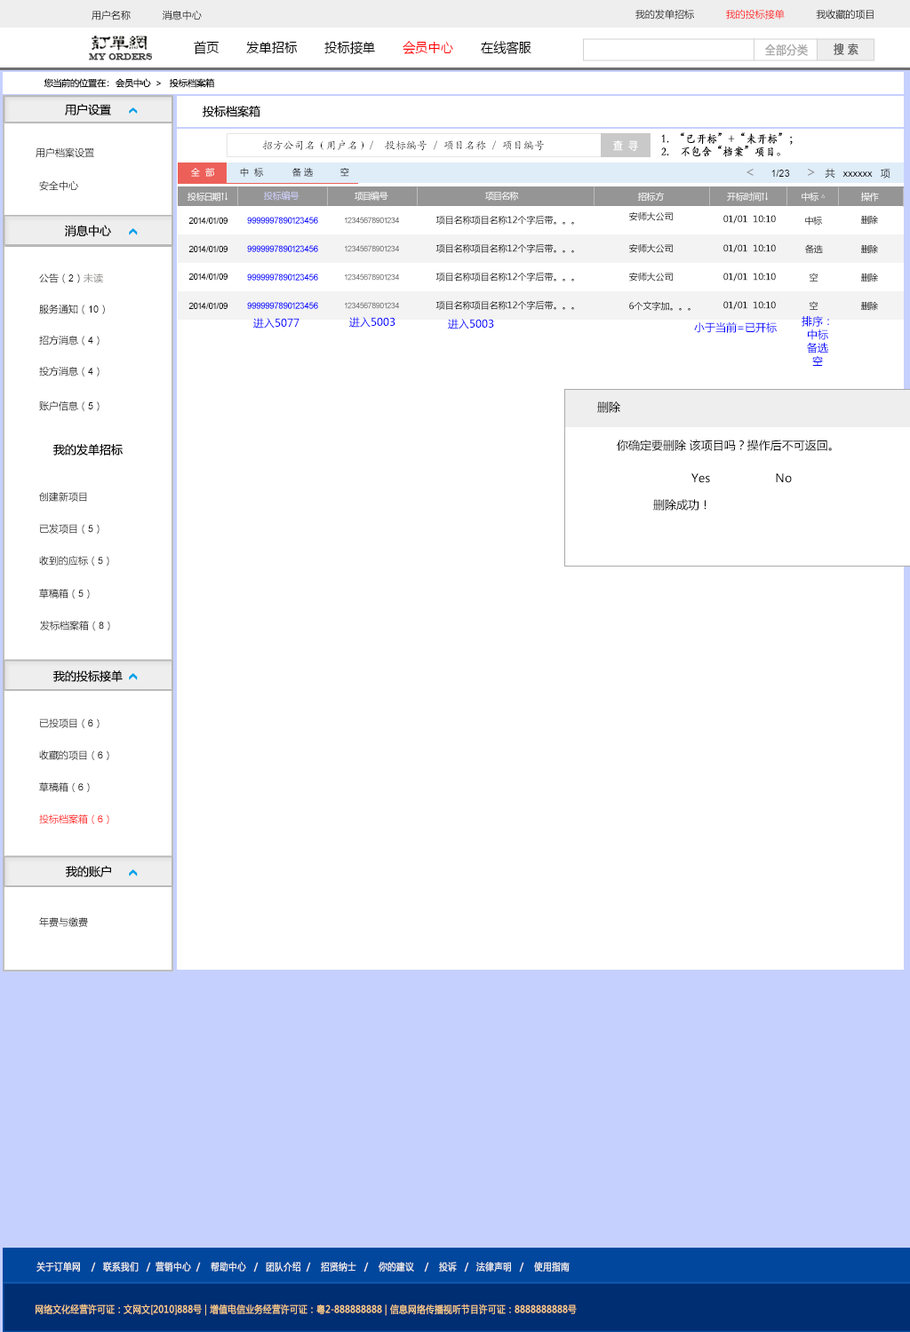
<style>
.page{position:relative;width:910px;height:1332px;background:#ffffff}
.page>*{position:absolute;margin:0}
.t1{font:9.8px "MicrosoftYaHei";color:#000000}
.t2{font:9.8px "MicrosoftYaHei"}
.t3{font:13.7px "MicrosoftYaHei";color:#000000;font-variant:small-caps;scale:0.94 1}
.t4{font:13.7px "MicrosoftYaHei";color:#ff0000;font-variant:small-caps;scale:0.94 1}
.t5{font:8.8px "EngraversMT";color:#434343;font-variant:small-caps;font-weight:bold;scale:0.86 1}
.t6{font:11.7px "MicrosoftYaHei";color:#aaaaaa;font-variant:small-caps;font-weight:bold;scale:0.86 1}
.t7{font:11.7px "MicrosoftYaHei";color:#626262;font-variant:small-caps;font-weight:bold;scale:0.86 1}
.t8{font:8.9px "MicrosoftYaHei";color:#060606}
.t9{font:11.5px "MicrosoftYaHei";color:#060606}
.t10{font:11.7px "STKaiti";color:#000000;font-variant:small-caps;font-weight:bold;scale:0.86 1}
.t11{font:9.8px "MicrosoftYaHei";color:#060606}
.t12{font:10.7px "KaiTi_GB2312";color:#000000}
.t13{font:10.7px "MicrosoftYaHei";color:#ffffff;font-variant:small-caps;font-weight:bold;scale:0.86 1}
.t14{font:9px "MicrosoftYaHei"}
.t15{font:9.8px "ArialMT";color:#060606}
.t16{font:14.2px "MicrosoftYaHei";color:#959595}
.t17{font:8.9px "MicrosoftYaHei";color:#ffffff}
.t18{font:8.9px "MicrosoftYaHei";color:#d1d2ff}
.t19{font:8.9px "ArialMT";color:#020202}
.t20{font:8.9px "ArialMT";color:#0000ff}
.t21{font:8px "ArialMT";color:#535353}
.t22{font:8.9px "MicrosoftYaHei";color:#000000}
.t23{font:8.9px "MicrosoftYaHei"}
.t24{font:8px "ArialMT";color:#626262}
.t25{font:9.8px "MicrosoftYaHei";color:#888584}
.t26{font:10.7px "MicrosoftYaHei";color:#0000ff}
.t27{font:10.7px/13.3px "MicrosoftYaHei";color:#0000ff}
.t28{font:11.5px "MicrosoftYaHei";color:#000000}
.t29{font:9.8px "ArialMT";color:#000000}
.t30{font:9.8px "ArialMT"}
.t31{font:9.8px "MicrosoftYaHei";color:#ff0000}
.t32{font:9.8px "ArialMT";color:#ff0000}
.t33{font:9.8px "MicrosoftYaHei";color:#eeeeee;font-variant:small-caps;font-weight:bold;scale:0.86 1}
.t34{font:13.7px "STXihei";color:#eeeeee;font-variant:small-caps;font-weight:bold;scale:0.86 1}
.t35{font:9.8px "MicrosoftYaHei";color:#facd89;font-variant:small-caps;font-weight:bold;scale:0.87 1}
.t36{font:9.8px "MicrosoftYaHei";color:#eeeeee;font-variant:small-caps;font-weight:bold;scale:0.87 1}
</style>
<div class="page">
<p class="t1" style="left:91px;top:10px;width:111px;height:10px">用户名称           消息中心</p>
<p class="t2" style="left:635px;top:9px;width:238px;height:11px">我的发单招标           我的投标接单           我收藏的项目</p>
<p class="t3" style="left:194px;top:41px;width:337px;height:14px">首页       发单招标       投标接单       <span class="t4">会员中心</span>       在线客服</p>
<p class="t5" style="left:89px;top:53px;width:64px;height:7px">MY ORDERS</p>
<p class="t6" style="left:765px;top:44px;width:42px;height:12px">全部分类</p>
<p class="t7" style="left:833px;top:43px;width:25px;height:12px">搜 索</p>
<p class="t8" style="left:44px;top:78px;width:171px;height:10px">您当前的位置在：  会员中心  &gt;   投标档案箱</p>
<p class="t9" style="left:65px;top:104px;width:46px;height:11px">用户设置</p>
<p class="t9" style="left:203px;top:106px;width:57px;height:11px">投标档案箱</p>
<p class="t10" style="left:661px;top:132px;width:131px;height:25px">1.  “已开标”+“未开标”；<br>2.    不包含“档案”项目。</p>
<p class="t11" style="left:36px;top:147px;width:58px;height:11px">用户档案设置</p>
<p class="t12" style="left:262px;top:140px;width:282px;height:11px">招方公司名（用户名）/  投标编号 / 项目名称 / 项目编号</p>
<p class="t13" style="left:613px;top:140px;width:25px;height:11px">查  寻</p>
<p class="t14" style="left:191px;top:168px;width:23px;height:9px">全  部</p>
<p class="t14" style="left:240px;top:168px;width:23px;height:9px">中  标</p>
<p class="t14" style="left:292px;top:168px;width:21px;height:9px">备 选</p>
<p class="t14" style="left:340px;top:168px;width:9px;height:9px">空</p>
<p class="t15" style="left:746px;top:168px;width:144px;height:11px"><span class="t16">&lt;     </span>1/23     <span class="t16">&gt;  </span><span class="t11">共  </span>xxxxxx  <span class="t11">项</span></p>
<p class="t2" style="left:39px;top:180px;width:39px;height:11px">安全中心</p>
<p class="t17" style="left:187px;top:192px;width:41px;height:10px">投标日期↑↓</p>
<p class="t18" style="left:264px;top:191px;width:35px;height:10px">投标编号</p>
<p class="t17" style="left:354px;top:191px;width:34px;height:10px">项目编号</p>
<p class="t17" style="left:485px;top:191px;width:34px;height:10px">项目名称</p>
<p class="t17" style="left:638px;top:192px;width:26px;height:10px">招标方</p>
<p class="t17" style="left:727px;top:192px;width:41px;height:10px">开标时间↑↓</p>
<p class="t17" style="left:801px;top:192px;width:24px;height:10px">中标 △</p>
<p class="t17" style="left:861px;top:192px;width:17px;height:10px">操作</p>
<p class="t19" style="left:188px;top:217px;width:39px;height:7px">2014/01/09</p>
<p class="t20" style="left:247px;top:217px;width:71px;height:7px">9999997890123456</p>
<p class="t21" style="left:345px;top:217px;width:54px;height:7px">12345678901234</p>
<p class="t22" style="left:435px;top:215px;width:139px;height:10px">项目名称项目名称12个字后带。。。</p>
<p class="t23" style="left:629px;top:211px;width:43px;height:10px">安师大公司</p>
<p class="t22" style="left:723px;top:215px;width:52px;height:9px">01/01  10:10</p>
<p class="t23" style="left:805px;top:216px;width:17px;height:10px">中标</p>
<p class="t23" style="left:861px;top:215px;width:17px;height:10px">删除</p>
<p class="t9" style="left:65px;top:225px;width:46px;height:12px">消息中心</p>
<p class="t19" style="left:188px;top:245px;width:39px;height:7px">2014/01/09</p>
<p class="t20" style="left:247px;top:245px;width:71px;height:7px">9999997890123456</p>
<p class="t24" style="left:345px;top:245px;width:54px;height:7px">12345678901234</p>
<p class="t22" style="left:435px;top:243px;width:139px;height:10px">项目名称项目名称12个字后带。。。</p>
<p class="t23" style="left:629px;top:243px;width:43px;height:10px">安师大公司</p>
<p class="t22" style="left:723px;top:244px;width:52px;height:9px">01/01  10:10</p>
<p class="t23" style="left:805px;top:244px;width:17px;height:10px">备选</p>
<p class="t23" style="left:861px;top:244px;width:17px;height:10px">删除</p>
<p class="t11" style="left:39px;top:273px;width:64px;height:10px">公告（<span class="t15">2</span>）<span class="t25">未读</span></p>
<p class="t19" style="left:188px;top:273px;width:39px;height:7px">2014/01/09</p>
<p class="t20" style="left:247px;top:274px;width:71px;height:7px">9999997890123456</p>
<p class="t24" style="left:345px;top:274px;width:54px;height:7px">12345678901234</p>
<p class="t22" style="left:435px;top:272px;width:139px;height:10px">项目名称项目名称12个字后带。。。</p>
<p class="t23" style="left:629px;top:272px;width:43px;height:10px">安师大公司</p>
<p class="t22" style="left:723px;top:273px;width:52px;height:9px">01/01  10:10</p>
<p class="t23" style="left:808px;top:273px;width:10px;height:9px">空</p>
<p class="t23" style="left:861px;top:273px;width:17px;height:9px">删除</p>
<p class="t11" style="left:39px;top:304px;width:66px;height:10px">服务通知（<span class="t15">10</span>）</p>
<p class="t19" style="left:188px;top:302px;width:39px;height:7px">2014/01/09</p>
<p class="t20" style="left:247px;top:302px;width:71px;height:7px">9999997890123456</p>
<p class="t24" style="left:345px;top:302px;width:54px;height:7px">12345678901234</p>
<p class="t22" style="left:435px;top:300px;width:139px;height:10px">项目名称项目名称12个字后带。。。</p>
<p class="t22" style="left:629px;top:301px;width:61px;height:10px">6个文字加。。。</p>
<p class="t22" style="left:723px;top:301px;width:52px;height:9px">01/01  10:10</p>
<p class="t23" style="left:808px;top:301px;width:10px;height:9px">空</p>
<p class="t23" style="left:861px;top:301px;width:17px;height:10px">删除</p>
<p class="t26" style="left:253px;top:318px;width:46px;height:11px">进入5077</p>
<p class="t26" style="left:349px;top:317px;width:46px;height:11px">进入5003</p>
<p class="t27" style="left:801px;top:316px;width:28px;height:50px;text-align:center">排序：<br>中标<br>备选<br>空</p>
<p class="t26" style="left:448px;top:319px;width:46px;height:11px">进入5003</p>
<p class="t26" style="left:694px;top:322px;width:82px;height:11px">小于当前=已开标</p>
<p class="t11" style="left:39px;top:335px;width:60px;height:11px">招方消息（<span class="t15">4</span>）</p>
<p class="t11" style="left:39px;top:366px;width:60px;height:11px">投方消息（<span class="t15">4</span>）</p>
<p class="t11" style="left:39px;top:401px;width:60px;height:10px">账户信息（<span class="t15">5</span>）</p>
<p class="t28" style="left:597px;top:401px;width:23px;height:12px">删除</p>
<p class="t9" style="left:53px;top:444px;width:70px;height:12px">我的发单招标</p>
<p class="t28" style="left:616px;top:440px;width:215px;height:11px">你确定要删除 该项目吗？操作后不可返回。</p>
<p class="t28" style="left:691px;top:473px;width:100px;height:10px">Yes                   No</p>
<p class="t2" style="left:39px;top:492px;width:48px;height:10px">创建新项目</p>
<p class="t28" style="left:653px;top:499px;width:53px;height:12px">删除成功！</p>
<p class="t1" style="left:39px;top:524px;width:60px;height:10px">已发项目（<span class="t29">5</span>）</p>
<p class="t11" style="left:39px;top:556px;width:70px;height:10px">收到的应标（<span class="t15">5</span>）</p>
<p class="t11" style="left:39px;top:589px;width:51px;height:10px">草稿箱（<span class="t15">5</span>）</p>
<p class="t2" style="left:40px;top:621px;width:70px;height:10px">发标档案箱（<span class="t30">8</span>）</p>
<p class="t9" style="left:53px;top:671px;width:70px;height:11px">我的投标接单</p>
<p class="t1" style="left:39px;top:719px;width:60px;height:9px">已投项目（<span class="t29">6</span>）</p>
<p class="t11" style="left:39px;top:751px;width:70px;height:9px">收藏的项目（<span class="t15">6</span>）</p>
<p class="t11" style="left:39px;top:783px;width:51px;height:9px">草稿箱（<span class="t15">6</span>）</p>
<p class="t31" style="left:39px;top:814px;width:70px;height:10px">投标档案箱（<span class="t32">6</span>）</p>
<p class="t9" style="left:66px;top:866px;width:45px;height:12px">我的账户</p>
<p class="t11" style="left:39px;top:918px;width:49px;height:9px">年费与缴费</p>
<p class="t33" style="left:36px;top:1261px;width:533px;height:11px"><span class="t34"><br><br></span>关于订单网    /   联系我们   /  营销中心  /    帮助中心   /   团队介绍  /    招贤纳士   /    你的建议    /    投诉   /   法律声明   /    使用指南</p>
<p class="t35" style="left:36px;top:1304px;width:540px;height:12px"><span class="t36"> </span>网络文化经营许可证：文网文[2010]888号 | 增值电信业务经营许可证：粤2-888888888 | 信息网络传播视听节目许可证：8888888888号</p>
</div>
